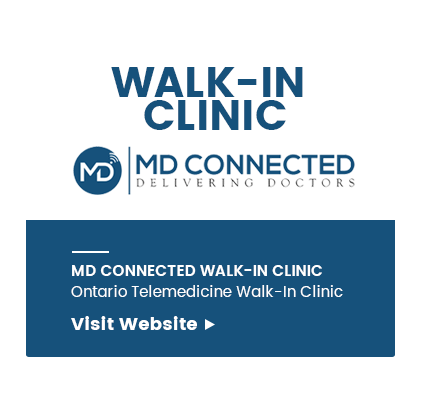
<style>
.page{position:relative;width:428px;height:396px;background:#ffffff}
.page>*{position:absolute;margin:0}
.t1{font:41.7px/33.4px "Poppins";letter-spacing:0.01em;color:#16517b}
.t2{font:15px/21px "Poppins-Regular";letter-spacing:0.01em;color:#ffffff}
.t3{font:15px/30px "Poppins-SemiBold";letter-spacing:0.01em;color:#ffffff}
.t4{font:18px/33px "Poppins";letter-spacing:0.01em;color:#ffffff}
</style>
<div class="page">
<p class="t1" style="left:111px;top:67px;width:192px;height:63px;text-align:center">WALK-IN <br>CLINIC</p>
<p class="t2" style="left:71px;top:265px;width:272px;height:65px"><span class="t3">MD CONNECTED WALK-IN CLINIC<br></span>Ontario Telemedicine Walk-In Clinic<br><span class="t4">Visit Website</span></p>
</div>
